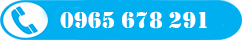
<style>
.page{position:relative;width:242px;height:40px;background:#00afef}
.page>*{position:absolute;margin:0}
.t1{font:24px "Stencil";color:#ffffff}
</style>
<div class="page">
<p class="t1" style="left:60px;top:11px;width:147px;height:18px">0965 678 291</p>
</div>
